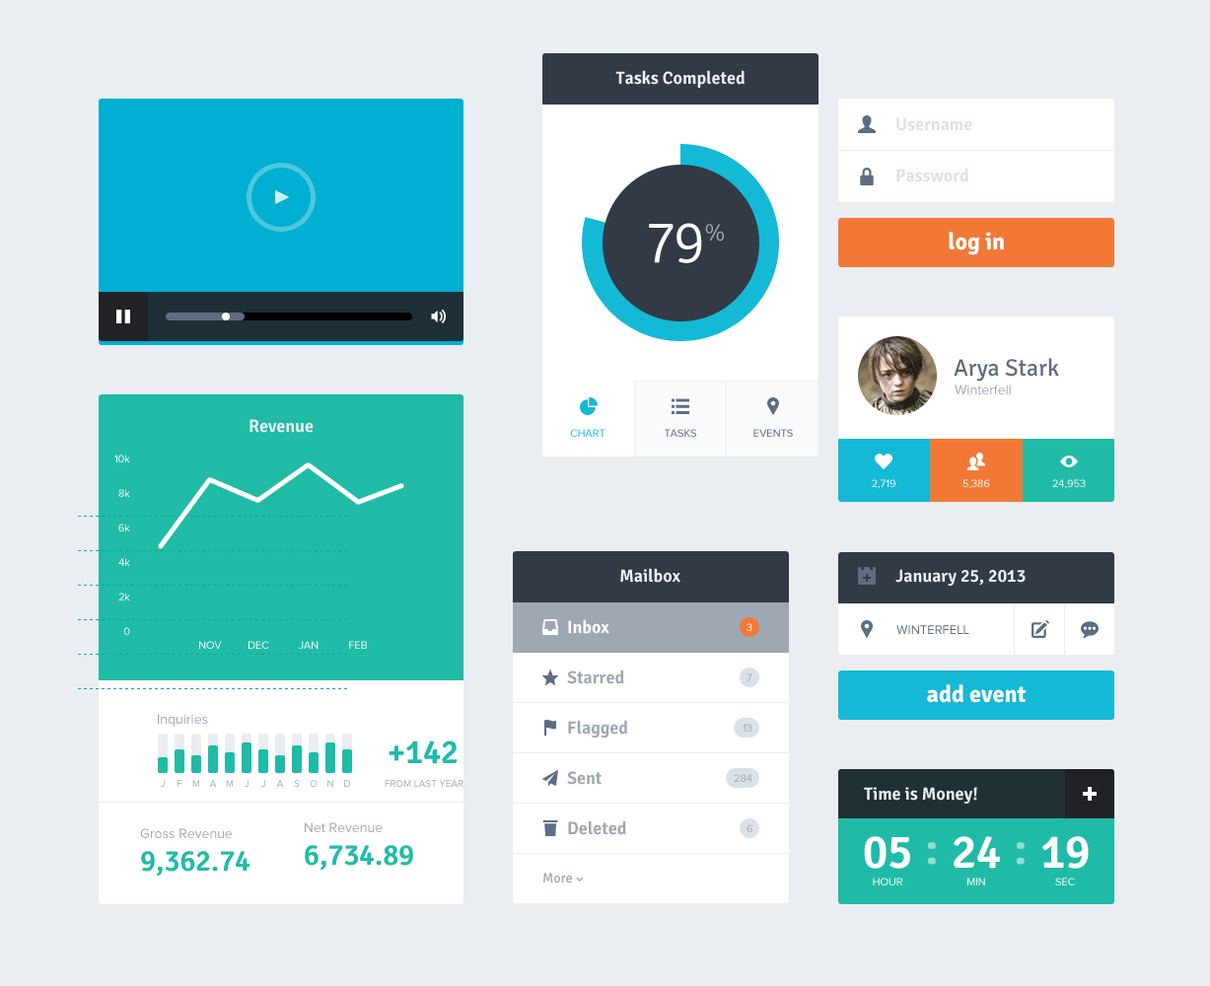
<style>
.page{position:relative;width:1210px;height:986px;background:#eaedf1}
.page>*{position:absolute;margin:0}
.t1{font:17.7px "Signika-Semibold";color:#f1f1f3}
.t2{font:17.7px "Signika-Semibold";color:#dbe1e8}
.t3{font:13.8px "SSStandard";color:#cceff6}
.t4{font:59.1px "Signika-Light";letter-spacing:-0.05em;color:#ffffff}
.t5{font:23.7px "Signika-Light";color:#9ea7b3}
.t6{font:23.7px "Signika-Bold";color:#ffffff}
.t7{font:23.7px "Signika-Regular";color:#5e6d81}
.t8{font:13.8px "ProximaNova-Regular";color:#9ea7b3}
.t9{font:10.8px "ProximaNova-Regular";color:#14b9d6;text-transform:uppercase}
.t10{font:10.8px "ProximaNova-Regular";color:#5e6d81;text-transform:uppercase}
.t11{font:10.8px/34.5px "ProximaNova-Regular";color:#ffffff}
.t12{font:17.7px "SSStandard";color:#ffffff}
.t13{font:10.8px "ProximaNova-Regular";color:#ffffff;text-transform:uppercase}
.t14{font:15.8px "SSStandard";color:#ffffff}
.t15{font:17.7px "Signika-Semibold";color:#ffffff}
.t16{font:10.8px "ProximaNova-Regular"}
.t17{font:12.8px "ProximaNova-Regular";color:#5e6d81;text-transform:uppercase}
.t18{font:10.8px "ProximaNova-Regular";color:#ffffff}
.t19{font:15.8px "SSStandard";color:#5e6d81}
.t20{font:17.7px "Signika-Semibold";color:#9ea7b3}
.t21{font:10.8px "ProximaNova-Regular";color:#9ea7b3}
.t22{font:33.5px "Signika-Semibold";color:#1fbba6}
.t23{font:9.9px "ProximaNova-Regular"}
.t24{font:9.9px "ProximaNova-Regular";color:#9ea7b3}
.t25{font:9.9px "ProximaNova-Regular";color:#9ea7b3;text-transform:uppercase}
.t26{font:29.6px "Signika-Semibold";color:#1fbba6}
.t27{font:47.3px "Signika-Semibold";color:#ffffff}
.t28{font:47.3px "Signika-Semibold";color:#8fddd3}
.t29{font:13.8px "Signika-Regular";color:#9ea7b3}
.t30{font:10.8px "ProximaNova-Regular";text-transform:uppercase}
</style>
<div class="page">
<p class="t1" style="left:615px;top:70px;width:129px;height:18px">Tasks Completed</p>
<p class="t2" style="left:896px;top:117px;width:76px;height:14px">Username</p>
<p class="t2" style="left:896px;top:168px;width:72px;height:14px">Password</p>
<p class="t3" style="left:275px;top:190px;width:14px;height:14px">▶</p>
<p class="t4" style="left:649px;top:223px;width:53px;height:40px">79</p>
<p class="t5" style="left:705px;top:224px;width:19px;height:18px">%</p>
<p class="t6" style="left:948px;top:232px;width:57px;height:23px">log in</p>
<p class="t7" style="left:953px;top:358px;width:106px;height:24px">Arya Stark</p>
<p class="t8" style="left:954px;top:384px;width:56px;height:10px">Winterfell</p>
<p class="t1" style="left:249px;top:419px;width:64px;height:14px">Revenue</p>
<p class="t9" style="left:570px;top:429px;width:35px;height:8px">Chart</p>
<p class="t10" style="left:664px;top:429px;width:32px;height:8px">Tasks</p>
<p class="t10" style="left:753px;top:429px;width:40px;height:8px">Events</p>
<p class="t11" style="left:114px;top:454px;width:16px;height:181px;text-align:right">10k<br>8k<br>6k<br>4k<br>2k<br>0</p>
<p class="t12" style="left:874px;top:453px;width:18px;height:16px">♥</p>
<p class="t13" style="left:871px;top:479px;width:24px;height:10px">2,719</p>
<p class="t13" style="left:962px;top:479px;width:28px;height:10px">5,386</p>
<p class="t13" style="left:1052px;top:479px;width:33px;height:10px">24,953</p>
<p class="t1" style="left:620px;top:568px;width:60px;height:15px">Mailbox</p>
<p class="t1" style="left:895px;top:569px;width:130px;height:17px">January 25, 2013</p>
<p class="t14" style="left:542px;top:619px;width:16px;height:16px">📥</p>
<p class="t15" style="left:568px;top:619px;width:41px;height:15px">Inbox</p>
<p class="t16" style="left:746px;top:623px;width:6px;height:8px">3</p>
<p class="t17" style="left:896px;top:625px;width:73px;height:9px">Winterfell</p>
<p class="t18" style="left:199px;top:641px;width:23px;height:8px">NOV</p>
<p class="t18" style="left:248px;top:641px;width:21px;height:8px">DEC</p>
<p class="t18" style="left:299px;top:641px;width:19px;height:8px">JAN</p>
<p class="t18" style="left:349px;top:641px;width:18px;height:8px">FEB</p>
<p class="t19" style="left:542px;top:669px;width:16px;height:16px">⋆</p>
<p class="t20" style="left:567px;top:669px;width:57px;height:15px">Starred</p>
<p class="t21" style="left:746px;top:673px;width:6px;height:8px">7</p>
<p class="t6" style="left:927px;top:684px;width:99px;height:19px">add event</p>
<p class="t8" style="left:158px;top:714px;width:50px;height:13px">Inquiries</p>
<p class="t19" style="left:544px;top:720px;width:12px;height:15px">⚑</p>
<p class="t20" style="left:568px;top:720px;width:60px;height:17px">Flagged</p>
<p class="t21" style="left:742px;top:724px;width:10px;height:7px">13</p>
<p class="t22" style="left:388px;top:740px;width:69px;height:24px">+142</p>
<p class="t20" style="left:567px;top:771px;width:34px;height:14px">Sent</p>
<p class="t21" style="left:733px;top:774px;width:19px;height:8px">284</p>
<p class="t23" style="left:161px;top:780px;width:4px;height:7px">J</p>
<p class="t24" style="left:177px;top:780px;width:5px;height:7px">F</p>
<p class="t24" style="left:192px;top:780px;width:7px;height:7px">M</p>
<p class="t24" style="left:209px;top:780px;width:8px;height:7px">A</p>
<p class="t24" style="left:226px;top:780px;width:7px;height:7px">M</p>
<p class="t23" style="left:244px;top:780px;width:4px;height:7px">J</p>
<p class="t23" style="left:261px;top:780px;width:4px;height:7px">J</p>
<p class="t24" style="left:276px;top:780px;width:8px;height:7px">A</p>
<p class="t24" style="left:294px;top:780px;width:6px;height:7px">S</p>
<p class="t23" style="left:310px;top:780px;width:7px;height:7px">O</p>
<p class="t24" style="left:327px;top:780px;width:6px;height:7px">N</p>
<p class="t23" style="left:344px;top:780px;width:6px;height:7px">D</p>
<p class="t25" style="left:384px;top:780px;width:79px;height:7px">from last year</p>
<p class="t1" style="left:864px;top:787px;width:113px;height:16px">Time is Money!</p>
<p class="t20" style="left:568px;top:820px;width:58px;height:15px">Deleted</p>
<p class="t8" style="left:140px;top:828px;width:92px;height:10px">Gross Revenue</p>
<p class="t8" style="left:305px;top:822px;width:77px;height:10px">Net Revenue</p>
<p class="t21" style="left:746px;top:824px;width:6px;height:8px">6</p>
<p class="t26" style="left:305px;top:845px;width:108px;height:25px">6,734.89</p>
<p class="t27" style="left:864px;top:836px;width:46px;height:33px">05</p>
<p class="t28" style="left:928px;top:842px;width:8px;height:23px">:</p>
<p class="t27" style="left:953px;top:836px;width:47px;height:33px">24</p>
<p class="t28" style="left:1016px;top:842px;width:8px;height:23px">:</p>
<p class="t27" style="left:1042px;top:836px;width:46px;height:33px">19</p>
<p class="t26" style="left:141px;top:851px;width:108px;height:25px">9,362.74</p>
<p class="t29" style="left:543px;top:872px;width:29px;height:11px">More</p>
<p class="t5" style="left:576px;top:876px;width:7px;height:5px">ˇ</p>
<p class="t13" style="left:872px;top:877px;width:30px;height:8px">Hour</p>
<p class="t13" style="left:967px;top:877px;width:18px;height:8px">Min</p>
<p class="t30" style="left:1055px;top:877px;width:20px;height:8px">Sec</p>
</div>
